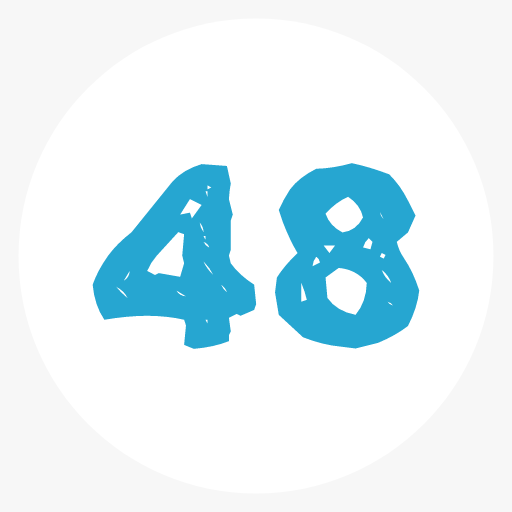
<style>
.page{position:relative;width:512px;height:512px;background:#ffffff}
.page>*{position:absolute;margin:0}
.t1{font:272.2px "AlphaEcho";color:#26a6d1}
</style>
<div class="page">
<p class="t1" style="left:92px;top:163px;width:328px;height:186px">48</p>
</div>
